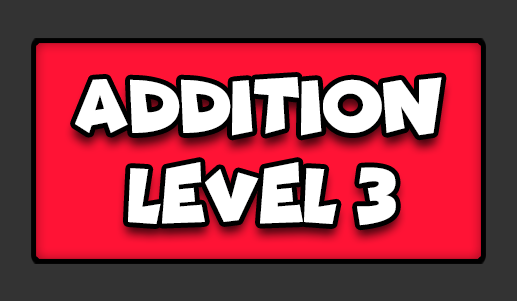
<style>
.page{position:relative;width:517px;height:301px;background:#333333}
.page>*{position:absolute;margin:0}
.t1{font:77.7px "Funhouse";color:#ffffff;scale:0.95 1}
</style>
<div class="page">
<p class="t1" style="left:75px;top:77px;width:367px;height:59px">ADDITION</p>
<p class="t1" style="left:128px;top:162px;width:268px;height:64px">LEVEL 3</p>
</div>
